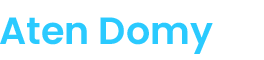
<style>
.page{position:relative;width:264px;height:60px;background:#ffffff}
.page>*{position:absolute;margin:0}
.t1{font:38px "Poppins-SemiBold";color:#2acaff}
</style>
<div class="page">
<p class="t1" style="left:0px;top:17px;width:213px;height:37px">Aten Domy</p>
</div>
